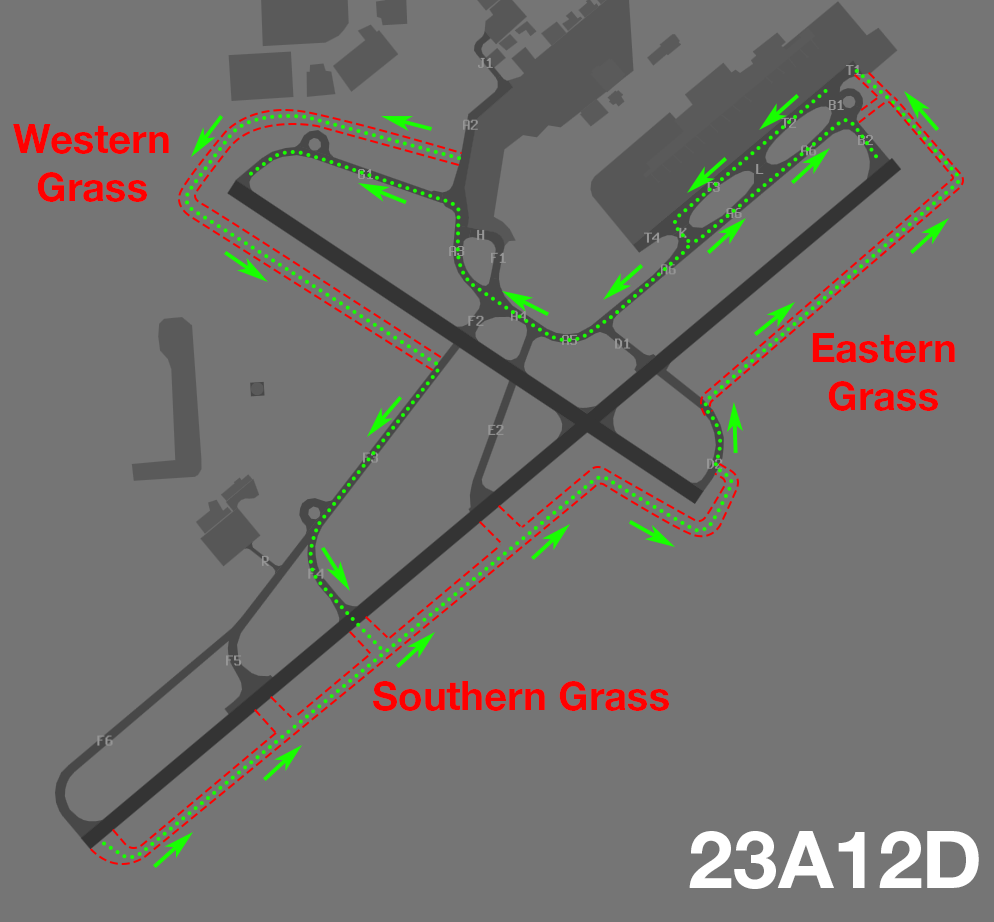
<style>
.page{position:relative;width:994px;height:922px;background:#757575}
.page>*{position:absolute;margin:0}
.t1{font:40px "HelveticaNeueLTStd-Bd";color:#ff0000}
.t2{font:80.2px "HelveticaNeueLTStd-Bd";color:#ffffff}
</style>
<div class="page">
<p class="t1" style="left:13px;top:124px;width:156px;height:78px;text-align:center">Western<br>Grass</p>
<p class="t1" style="left:812px;top:333px;width:143px;height:78px;text-align:center">Eastern<br>Grass</p>
<p class="t1" style="left:373px;top:681px;width:296px;height:30px">Southern Grass</p>
<p class="t2" style="left:689px;top:831px;width:290px;height:58px">23A12D</p>
</div>
